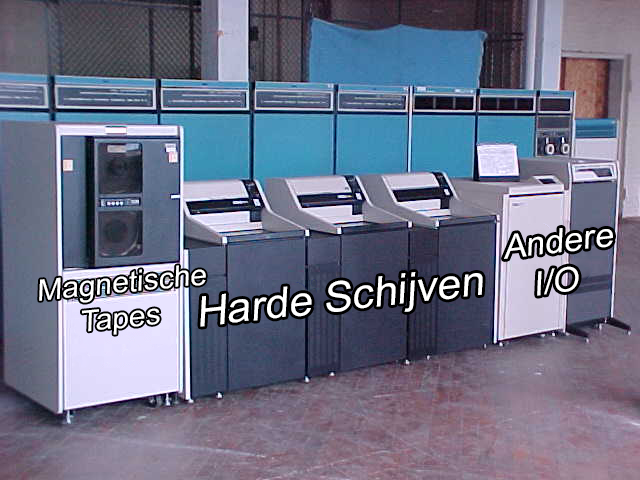
<style>
.page{position:relative;width:640px;height:480px}
.page>*{position:absolute;margin:0}
.t1{font:33.9px "ArialMT";color:#ffffff}
.t2{font:29.6px "ArialMT";color:#ffffff}
.t3{font:42.2px "ArialMT";color:#ffffff}
</style>
<div class="page">
<p class="t1" style="left:504px;top:228px;width:109px;height:68px;text-align:center;rotate:-7deg">Andere<br>I/O</p>
<p class="t2" style="left:39px;top:265px;width:167px;height:70px;text-align:center;rotate:-6deg">Magnetische<br>Tapes</p>
<p class="t3" style="left:200px;top:272px;width:283px;height:55px;rotate:-6deg">Harde Schijven</p>
</div>
